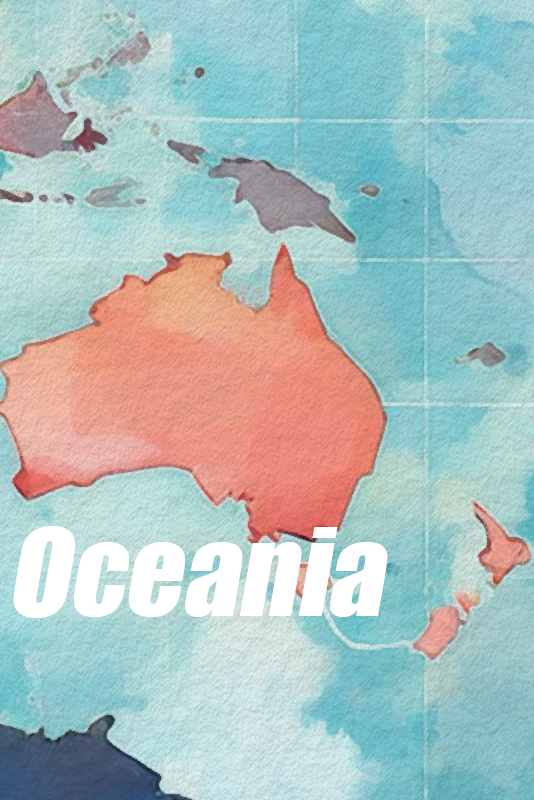
<style>
.page{position:relative;width:534px;height:800px}
.page>*{position:absolute;margin:0}
.t1{font:112px "Impact";color:#ffffff;font-style:italic}
</style>
<div class="page">
<p class="t1" style="left:13px;top:526px;width:375px;height:92px">Oceania</p>
</div>
